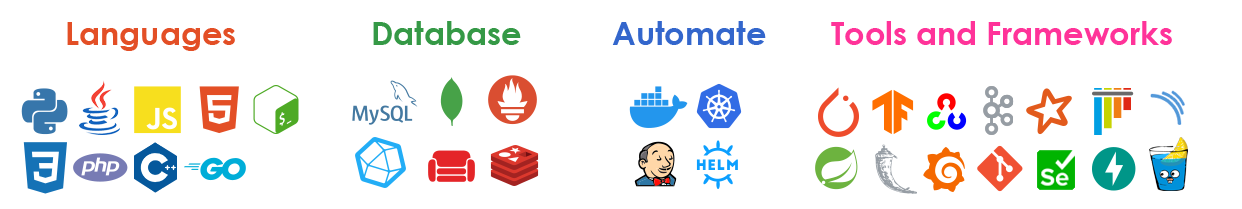
<style>
.page{position:relative;width:1242px;height:209px;background:#ffffff}
.page>*{position:absolute;margin:0}
.t1{font:32px "CenturyGothic-Bold";color:#e34f26}
.t2{font:32px "CenturyGothic-Bold";color:#359946}
.t3{font:32px "CenturyGothic-Bold";color:#3366cc}
.t4{font:32px "CenturyGothic-Bold";color:#ff3399}
</style>
<div class="page">
<p class="t1" style="left:67px;top:22px;width:168px;height:29px">Languages</p>
<p class="t2" style="left:373px;top:21px;width:148px;height:24px">Database</p>
<p class="t3" style="left:612px;top:21px;width:154px;height:24px">Automate</p>
<p class="t4" style="left:831px;top:21px;width:341px;height:24px">Tools and Frameworks</p>
</div>
